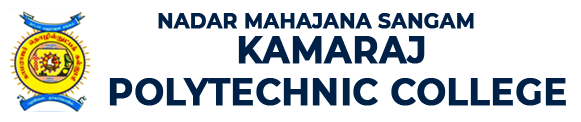
<style>
.page{position:relative;width:581px;height:122px;background:#ffffff}
.page>*{position:absolute;margin:0}
.t1{font:22px "Montserrat-Bold";color:#002147;font-weight:bold;scale:0.91 1}
.t2{font:38.5px "Montserrat-Bold";color:#002147;font-weight:bold;scale:0.91 1}
</style>
<div class="page">
<p class="t1" style="left:158px;top:13px;width:316px;height:16px">NADAR MAHAJANA SANGAM</p>
<p class="t2" style="left:109px;top:36px;width:457px;height:70px;text-align:center">KAMARAJ <br>POLYTECHNIC COLLEGE</p>
</div>
